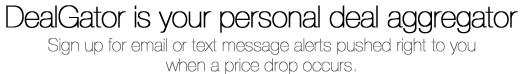
<style>
.page{position:relative;width:527px;height:74px;background:#ffffff}
.page>*{position:absolute;margin:0}
.t1{font:30px "HelveticaNeue-UltraLight";letter-spacing:-0.025em;color:#000000;font-weight:bold}
.t2{font:18px/20px "HelveticaNeue-UltraLight";letter-spacing:-0.025em;color:#5b5b5b;font-weight:bold}
</style>
<div class="page">
<p class="t1" style="left:6px;top:5px;width:512px;height:29px">DealGator is your personal deal aggregator</p>
<p class="t2" style="left:48px;top:38px;width:428px;height:37px;text-align:center">Sign up for email or text message alerts pushed right to you<br>when a price drop occurs.</p>
</div>
